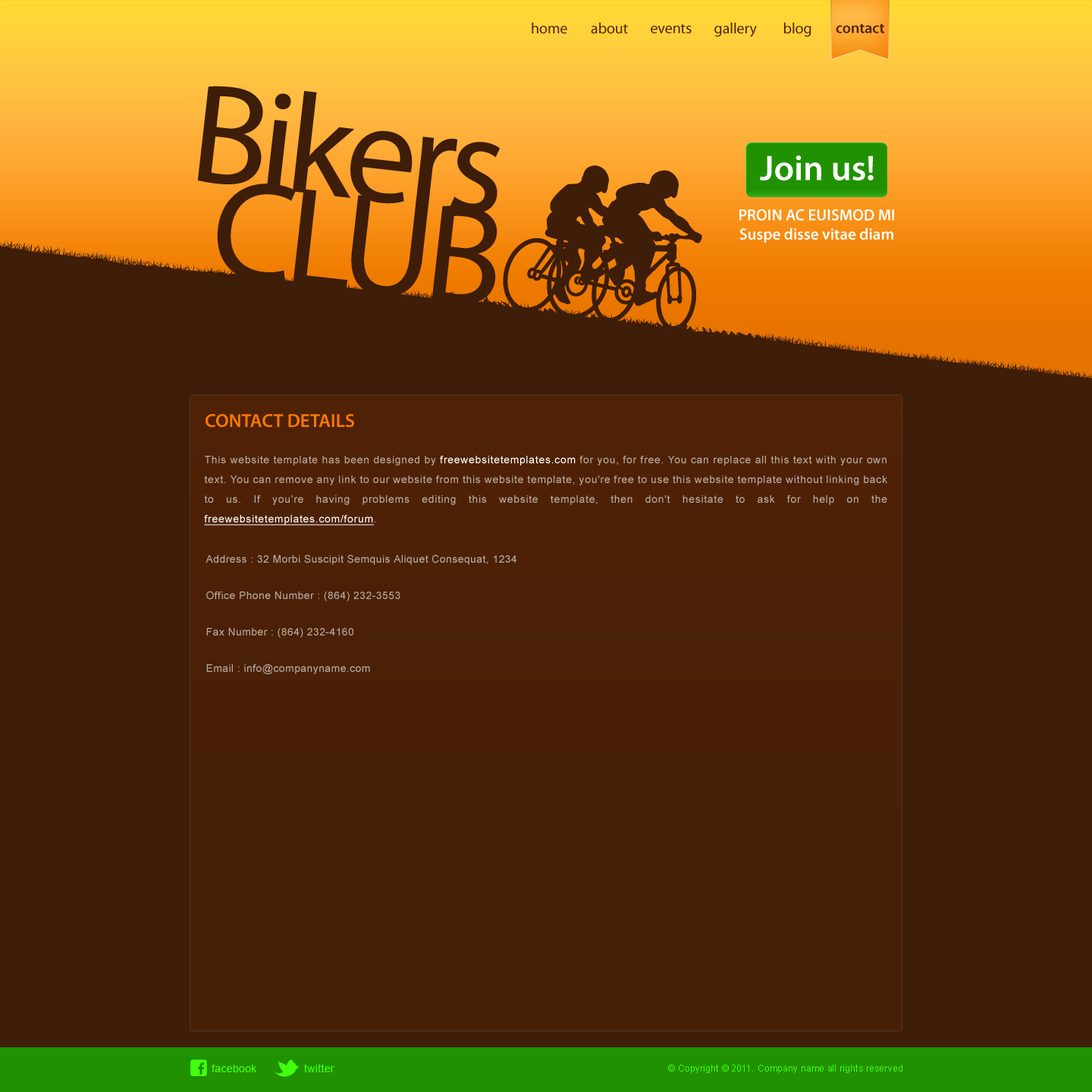
<style>
.page{position:relative;width:1092px;height:1092px;background:#3e1d09}
.page>*{position:absolute;margin:0}
.t1{font:15.2px "MyriadPro-Regular";letter-spacing:-0.003em;color:#552305}
.t2{font:15.2px "MyriadPro-Semibold";letter-spacing:-0.003em;color:#552305}
.t3{font:142.1px "MyriadPro-Regular";letter-spacing:-0.05em;color:#3e1d09}
.t4{font:35.7px "MyriadPro-Semibold";color:#ffffff}
.t5{font:142.1px "MyriadPro-Regular";letter-spacing:-0.05em;color:#3e1d09;text-transform:uppercase}
.t6{font:15.9px "MyriadPro-Semibold";color:#ffffff}
.t7{font:15.9px "MyriadPro-Semibold";color:#ffffff;text-transform:uppercase}
.t8{font:19px "MyriadPro-Semibold";color:#ff7800;text-transform:uppercase}
.t9{font:10.6px/19.7px "ArialMT";letter-spacing:0.05em;color:#bbaca2}
.t10{font:10.6px/19.7px "ArialMT";letter-spacing:0.05em;color:#ffffff}
.t11{font:10.6px/19.7px "ArialMT";letter-spacing:0.05em;color:#ffffff;text-decoration:underline}
.t12{font:10.6px/18.2px "ArialMT";letter-spacing:0.03em;color:#bbaca2}
.t13{font:10.6px "ArialMT";letter-spacing:0.025em;color:#42ff0e}
.t14{font:9.1px "ArialMT";letter-spacing:0.025em;color:#42ff0e}
</style>
<div class="page">
<p class="t1" style="left:532px;top:22px;width:35px;height:12px">home</p>
<p class="t1" style="left:591px;top:22px;width:37px;height:12px">about</p>
<p class="t1" style="left:651px;top:24px;width:41px;height:9px">events</p>
<p class="t1" style="left:714px;top:22px;width:43px;height:15px">gallery</p>
<p class="t1" style="left:784px;top:22px;width:27px;height:15px">blog</p>
<p class="t2" style="left:836px;top:24px;width:48px;height:9px">contact</p>
<p class="t3" style="left:197px;top:86px;width:303px;height:128px;rotate:6deg">Bikers</p>
<p class="t4" style="left:760px;top:155px;width:114px;height:25px">Join us!</p>
<p class="t5" style="left:217px;top:184px;width:280px;height:120px;rotate:6deg">Club</p>
<p class="t6" style="left:739px;top:209px;width:155px;height:34px;text-align:center"><span class="t7">Proin ac euismod mi</span><br>Suspe disse vitae diam</p>
<p class="t8" style="left:206px;top:414px;width:148px;height:14px">Contact Details</p>
<p class="t9" style="left:204px;top:456px;width:683px;height:70px;text-align:justify">This website template has been designed by <span class="t10">freewebsitetemplates.com</span> for you, for free. You can replace all this text with your own text. You can remove any link to our website from this website template, you're free to use this website template without linking back to us. If you're having problems editing this website template, then don't hesitate to ask for help on the <span class="t11">freewebsitetemplates.com/forum</span>.</p>
<p class="t12" style="left:206px;top:554px;width:310px;height:120px">Address : 32 Morbi Suscipit Semquis Aliquet Consequat, 1234<br><br>Office Phone Number : (864) 232-3553<br><br>Fax Number : (864) 232-4160<br><br>Email : info@companyname.com</p>
<p class="t13" style="left:212px;top:1065px;width:45px;height:7px">facebook</p>
<p class="t13" style="left:304px;top:1064px;width:30px;height:8px">twitter</p>
<p class="t14" style="left:668px;top:1065px;width:234px;height:8px">© Copyright © 2011. Company name all rights reserved</p>
</div>
